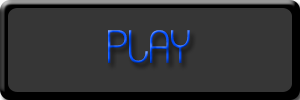
<style>
.page{position:relative;width:300px;height:100px;background:#363636}
.page>*{position:absolute;margin:0}
.t1{font:48px "SexDrugsAndFidgetSpinners"}
</style>
<div class="page">
<p class="t1" style="left:108px;top:30px;width:82px;height:33px">PLAY</p>
</div>
